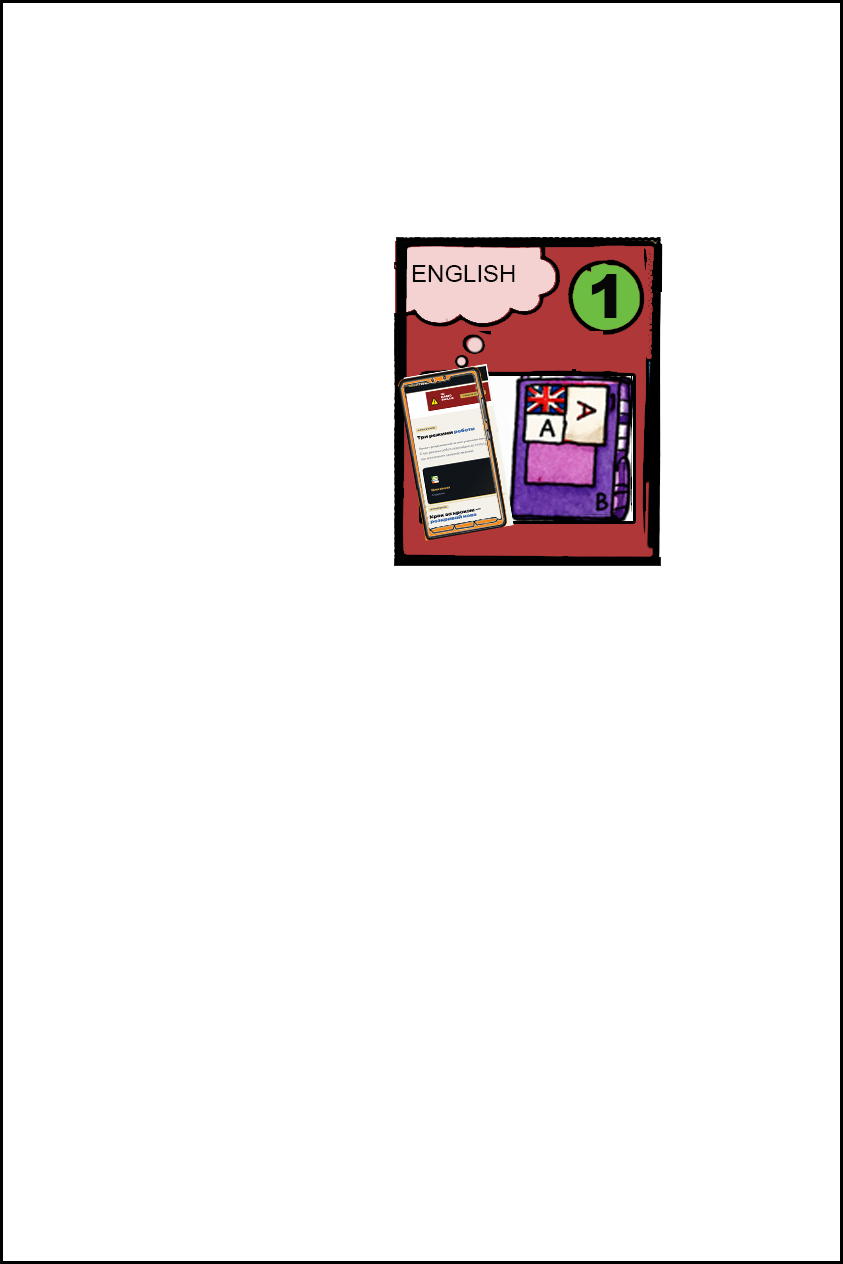
<style>
.page{position:relative;width:843px;height:1264px;background:#ffffff}
.page>*{position:absolute;margin:0}
.t1{font:24px "ArialMT";color:#070707}
.t2{font:60px "Arial-Black";color:#070707}
</style>
<div class="page">
<p class="t1" style="left:412px;top:265px;width:103px;height:17px">ENGLISH</p>
<p class="t2" style="left:591px;top:274px;width:26px;height:44px">1</p>
</div>
